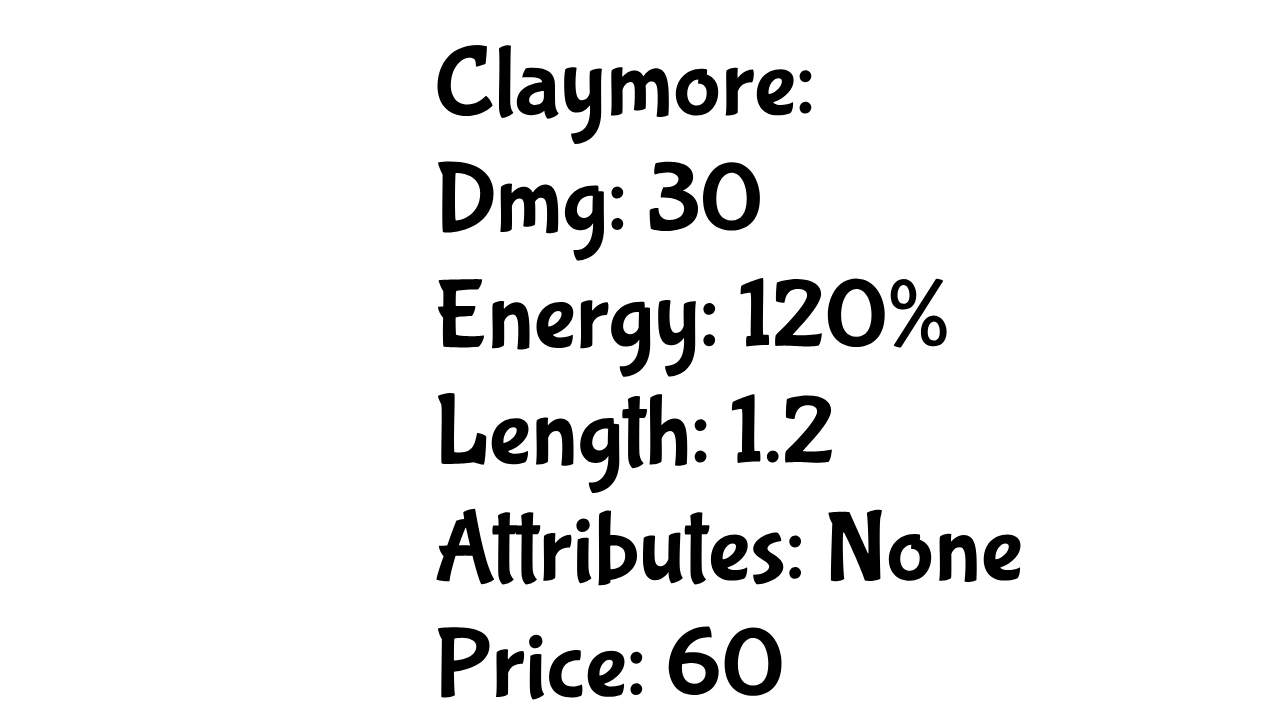
<style>
.page{position:relative;width:1280px;height:720px;background:#ffffff}
.page>*{position:absolute;margin:0}
.t1{font:100px "BubblegumSans-Regular";color:#000000}
</style>
<div class="page">
<p class="t1" style="left:436px;top:45px;width:585px;height:655px">Claymore:<br>Dmg: 30<br>Energy: 120%<br>Length: 1.2 <br>Attributes: None<br>Price: 60</p>
</div>
